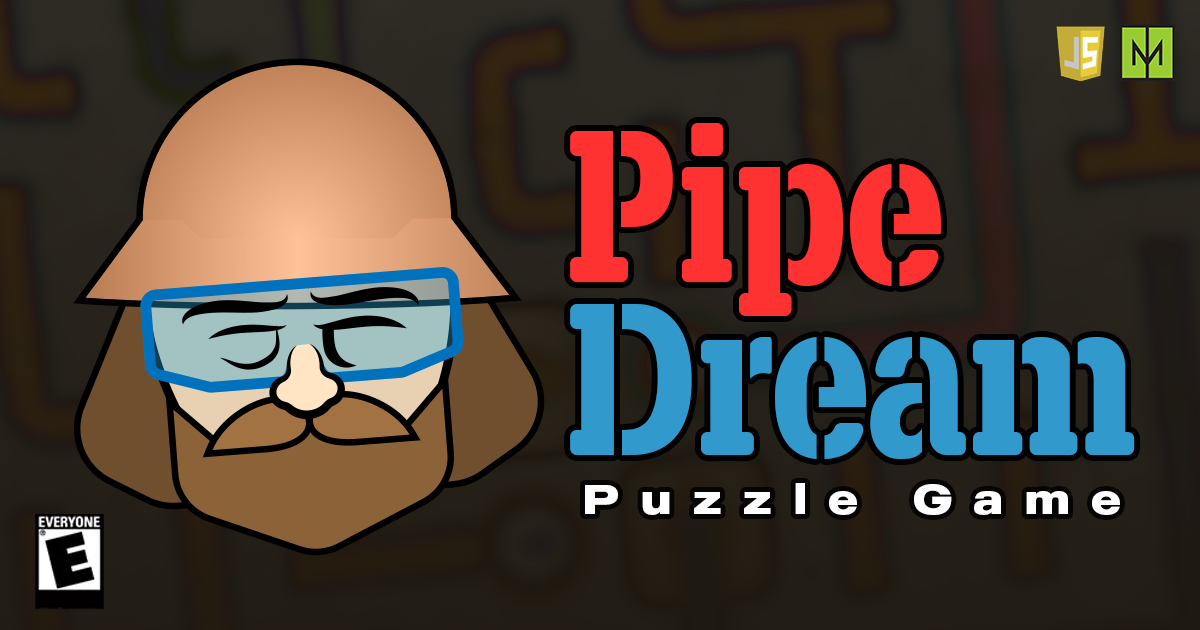
<style>
.page{position:relative;width:1200px;height:630px}
.page>*{position:absolute;margin:0}
.t1{font:190px/173px "X.Template";color:#3299cc}
.t2{font:190px/173px "X.Template";color:#ff3232}
.t3{font:42px "MADEOuterSans-Bold";letter-spacing:0.52em;color:#ffffff}
</style>
<div class="page">
<p class="t1" style="left:570px;top:123px;width:565px;height:336px"><span class="t2">Pipe<br></span>Dream</p>
<p class="t3" style="left:585px;top:483px;width:535px;height:32px">Puzzle Game</p>
</div>
